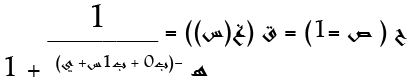
<style>
.page{position:relative;width:408px;height:78px;background:#ffffff}
.page>*{position:absolute;margin:0}
.t1{font:27px "Andalus";color:#000000}
.t2{font:20.6px "Andalus";color:#000000}
.t3{font:20.6px "Andalus";color:#ffffff}
.t4{font:24.2px "Andalus";color:#000000}
.t5{font:24.2px "Andalus";color:#ffffff}
</style>
<div class="page">
<p class="t1" style="left:92px;top:4px;width:11px;height:23px">1</p>
<p class="t2" style="left:35px;top:20px;width:372px;height:27px">ح ( ص =1) = ق (غ(س)) = ________<span class="t3">1</span></p>
<p class="t4" style="left:5px;top:55px;width:203px;height:22px">1 + ه -(ب0 + ب1س+ ي)<span class="t5">ء</span></p>
</div>
